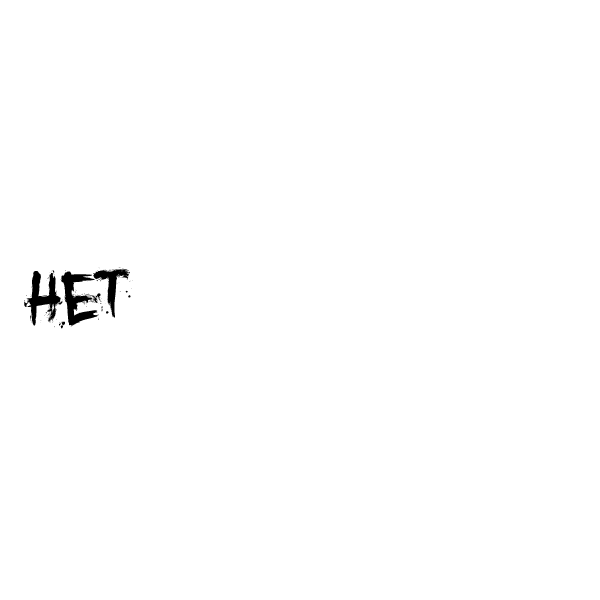
<style>
.page{position:relative;width:600px;height:600px;background:#ffffff}
.page>*{position:absolute;margin:0}
.t1{font:100px "YouMurdererBB";color:#000000}
</style>
<div class="page">
<p class="t1" style="left:24px;top:267px;width:109px;height:62px">нет</p>
</div>
